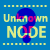
<style>
.page{position:relative;width:50px;height:50px;background:#0080c0}
.page>*{position:absolute;margin:0}
.t1{font:15px "TwCenMT-CondensedExtraBold";color:#dbed89}
.t2{font:10px "AdobeGothicStd-Bold";color:#dbed89}
.t3{font:51.3px "TwCenMT-CondensedExtraBold"}
.t4{font:15px "AdobeGothicStd-Bold";color:#dbed89}
</style>
<div class="page">
<p class="t1" style="left:3px;top:5px;width:44px;height:2px">...........</p>
<p class="t2" style="left:3px;top:13px;width:45px;height:9px">Unknown</p>
<p class="t3" style="left:15px;top:8px;width:21px;height:35px">?</p>
<p class="t4" style="left:7px;top:26px;width:39px;height:12px">NODE</p>
<p class="t1" style="left:2px;top:43px;width:44px;height:2px">...........</p>
</div>
